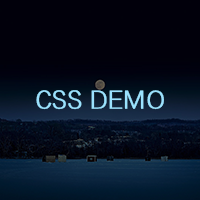
<style>
.page{position:relative;width:200px;height:200px;background:#01000b}
.page>*{position:absolute;margin:0}
.t1{font:24px "FZXH1JW--GB1-0";color:#9be2fe;font-weight:bold}
</style>
<div class="page">
<p class="t1" style="left:36px;top:90px;width:128px;height:20px">CSS DEMO</p>
</div>
